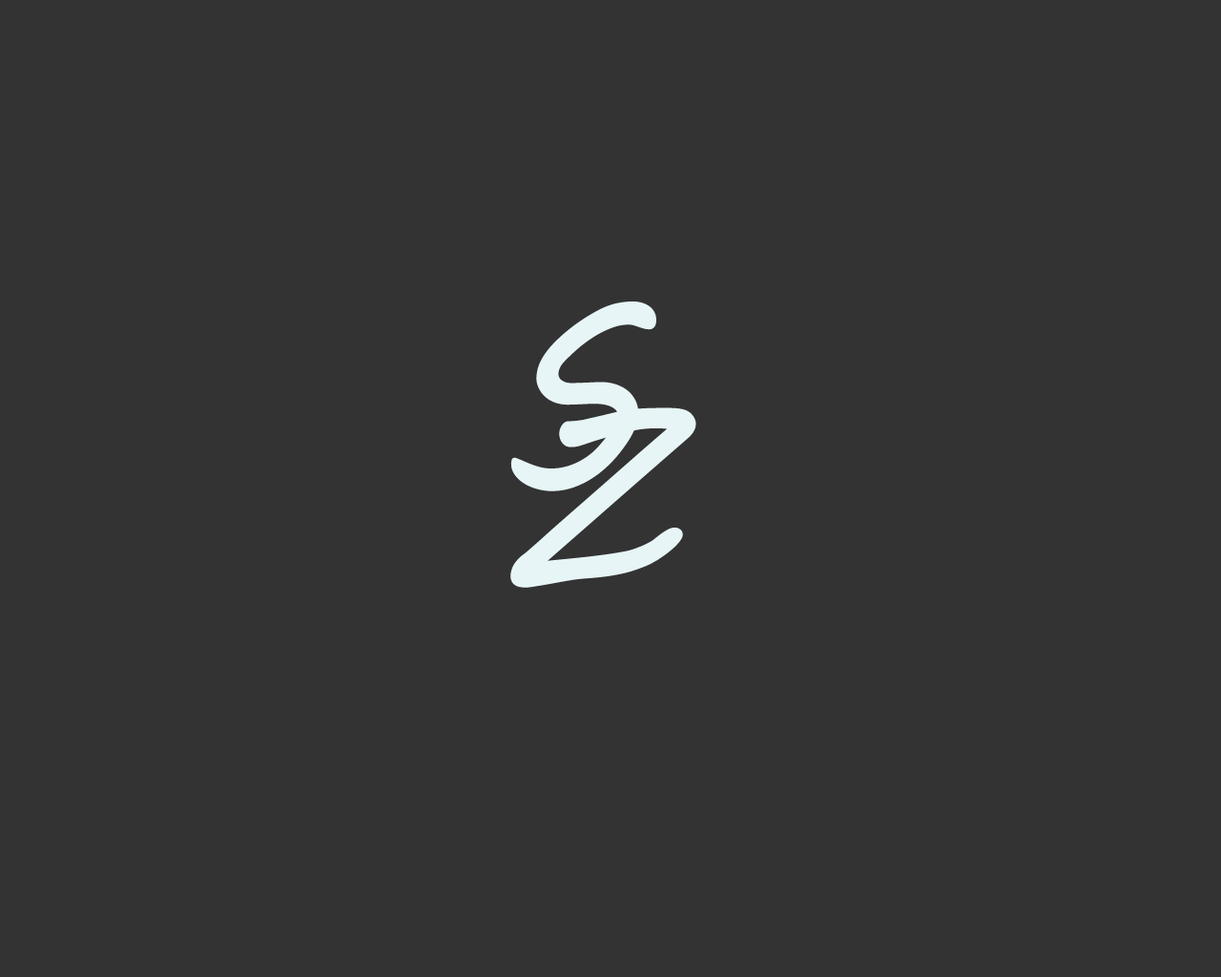
<style>
.page{position:relative;width:1221px;height:977px;background:#333333}
.page>*{position:absolute;margin:0}
.t1{font:238.5px "MVBoli";color:#e7f5f6}
</style>
<div class="page">
<p class="t1" style="left:510px;top:301px;width:146px;height:190px">S</p>
<p class="t1" style="left:510px;top:407px;width:186px;height:181px">Z</p>
</div>
